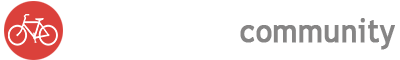
<style>
.page{position:relative;width:400px;height:60px;background:#ffffff}
.page>*{position:absolute;margin:0}
.t1{font:33px "TrebuchetMS";color:#868585;font-weight:bold;scale:0.9 1}
</style>
<div class="page">
<p class="t1" style="left:240px;top:18px;width:155px;height:32px">community</p>
</div>
